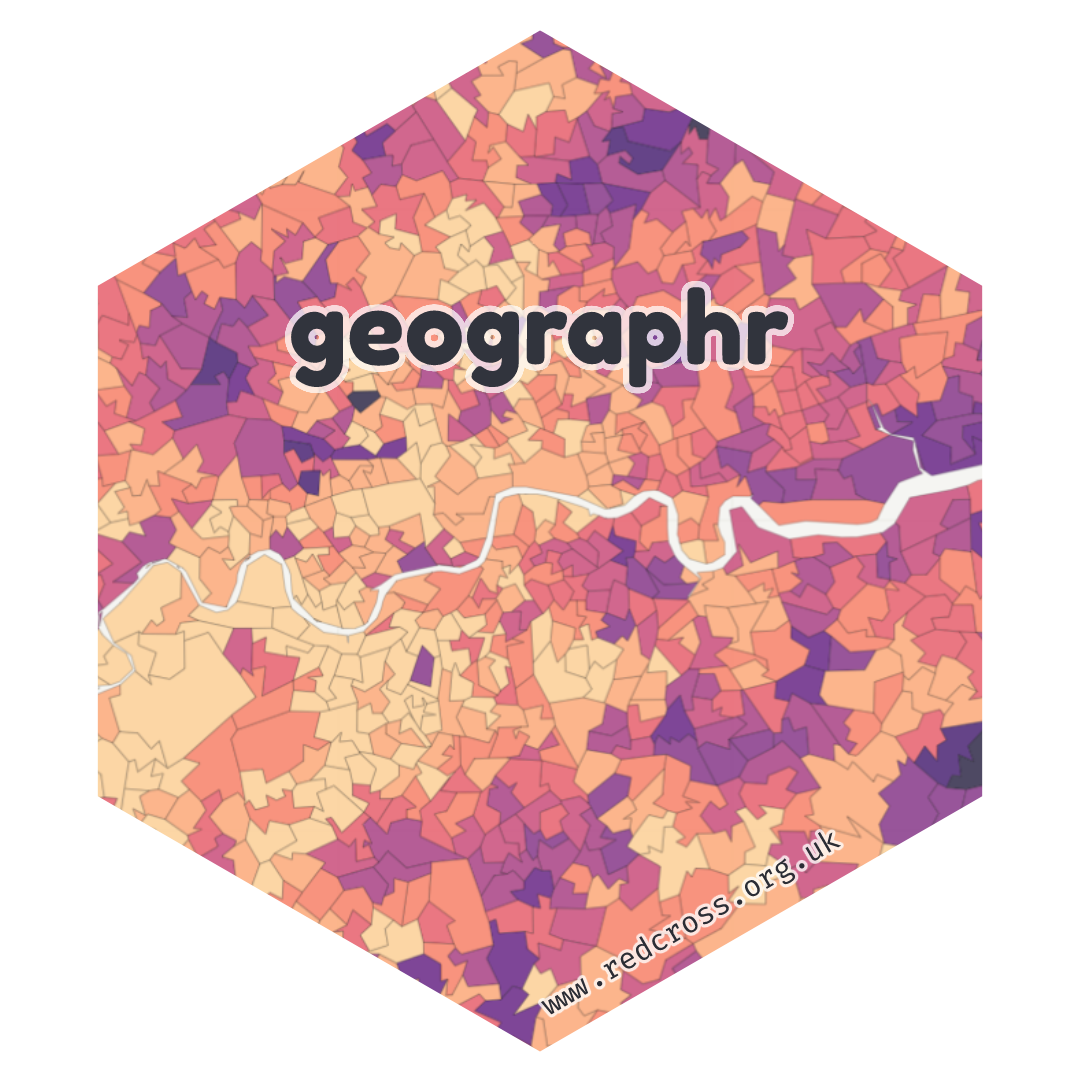
<style>
.page{position:relative;width:1080px;height:1080px;background:#ffffff}
.page>*{position:absolute;margin:0}
.t1{font:100px "FredokaOne-Regular";color:#31343d}
.t2{font:30px "FiraCode-Regular";color:#2b2d35}
</style>
<div class="page">
<p class="t1" style="left:291px;top:287px;width:498px;height:101px">geographr</p>
<p class="t2" style="left:540px;top:831px;width:302px;height:184px;rotate:-30deg">www.redcross.org.uk</p>
</div>
